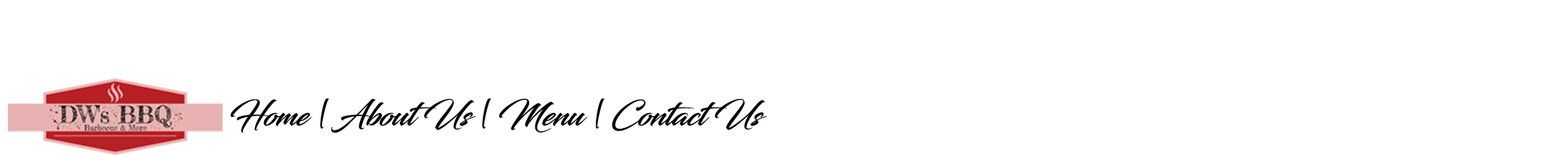
<style>
.page{position:relative;width:1568px;height:157px;background:#ffffff}
.page>*{position:absolute;margin:0}
.t1{font:31.4px "Blacksword";color:#000000}
</style>
<div class="page">
<p class="t1" style="left:230px;top:98px;width:537px;height:34px">Home | About Us | Menu | Contact Us</p>
</div>
